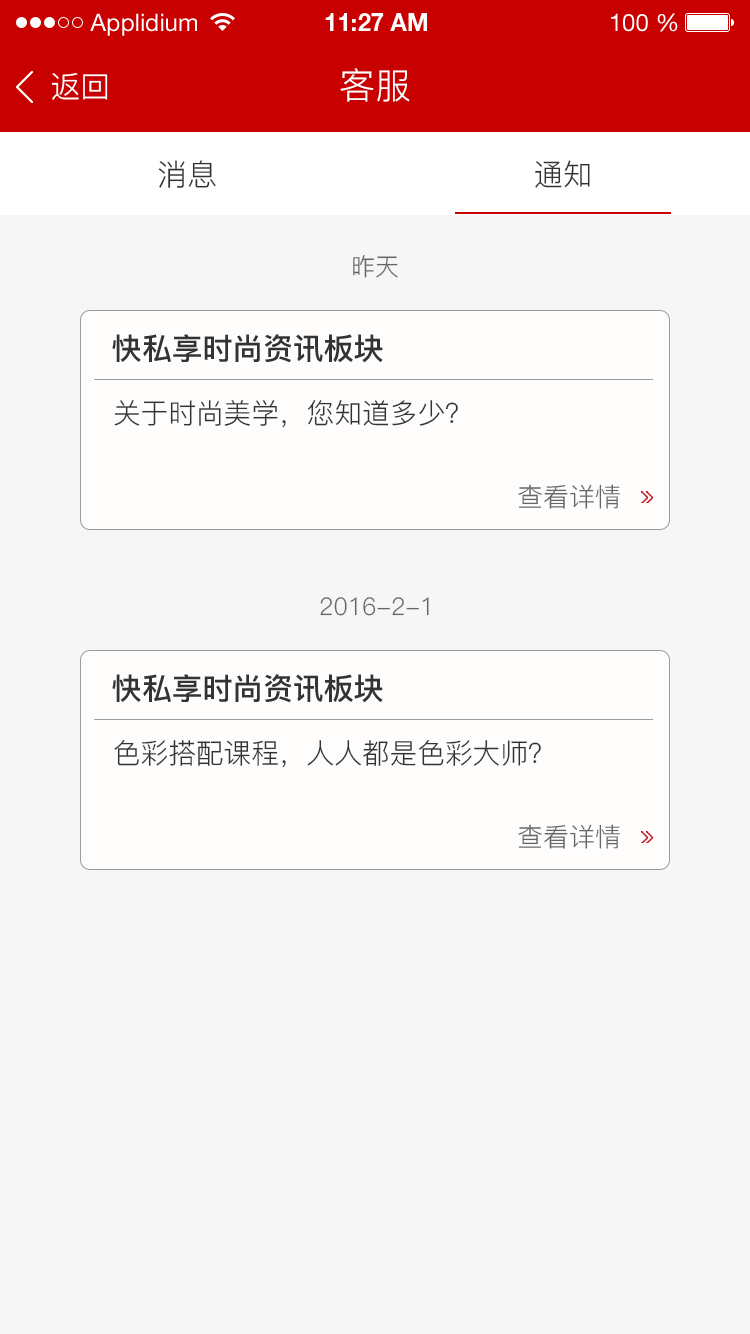
<style>
.page{position:relative;width:750px;height:1334px;background:#f6f6f6}
.page>*{position:absolute;margin:0}
.t1{font:24px "HelveticaNeueLTStd-Roman";color:#ffffff}
.t2{font:24px "HelveticaNeueLTStd-Bd";color:#ffffff}
.t3{font:30px "PingFang-SC-Regular";color:#ffffff}
.t4{font:36px "PingFang-SC-Regular";color:#ffffff}
.t5{font:30px "PingFang-SC-Regular";color:#333333}
.t6{font:24.3px "PingFang-SC-Regular";color:#666666}
.t7{font:30px "PingFang-SC-Bold";color:#333333}
.t8{font:28px "PingFang-SC-Regular";color:#333333}
.t9{font:26px "PingFang-SC-Regular";color:#666666}
</style>
<div class="page">
<p class="t1" style="left:90px;top:13px;width:107px;height:23px">Applidium</p>
<p class="t2" style="left:325px;top:13px;width:102px;height:18px">11:27 AM</p>
<p class="t1" style="left:611px;top:13px;width:67px;height:19px">100 %</p>
<p class="t3" style="left:51px;top:73px;width:57px;height:27px">返回</p>
<p class="t4" style="left:340px;top:68px;width:70px;height:34px">客服</p>
<p class="t5" style="left:158px;top:160px;width:58px;height:28px">消息</p>
<p class="t5" style="left:535px;top:160px;width:55px;height:28px">通知</p>
<p class="t6" style="left:353px;top:255px;width:45px;height:23px">昨天</p>
<p class="t7" style="left:112px;top:334px;width:271px;height:29px">快私享时尚资讯板块</p>
<p class="t8" style="left:114px;top:400px;width:344px;height:28px">关于时尚美学，您知道多少？</p>
<p class="t9" style="left:518px;top:484px;width:102px;height:25px">查看详情</p>
<p class="t6" style="left:320px;top:597px;width:109px;height:19px">2016-2-1</p>
<p class="t7" style="left:112px;top:674px;width:271px;height:29px">快私享时尚资讯板块</p>
<p class="t8" style="left:114px;top:740px;width:427px;height:28px">色彩搭配课程，人人都是色彩大师？</p>
<p class="t9" style="left:518px;top:824px;width:102px;height:25px">查看详情</p>
</div>
